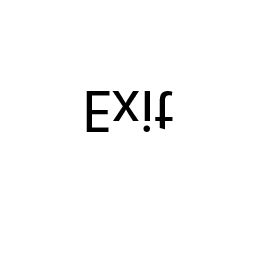
<style>
.page{position:relative;width:256px;height:256px;background:#ffffff}
.page>*{position:absolute;margin:0}
.t1{font:60px "MyriadPro-Regular";color:#000000}
</style>
<div class="page">
<p class="t1" style="left:86px;top:91px;width:87px;height:41px">Exit</p>
</div>
